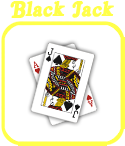
<style>
.page{position:relative;width:125px;height:146px;background:#ffffff}
.page>*{position:absolute;margin:0}
.t1{font:23.7px "RoyalAcid";color:#ffff4a}
</style>
<div class="page">
<p class="t1" style="left:10px;top:1px;width:104px;height:17px">Black Jack</p>
</div>
